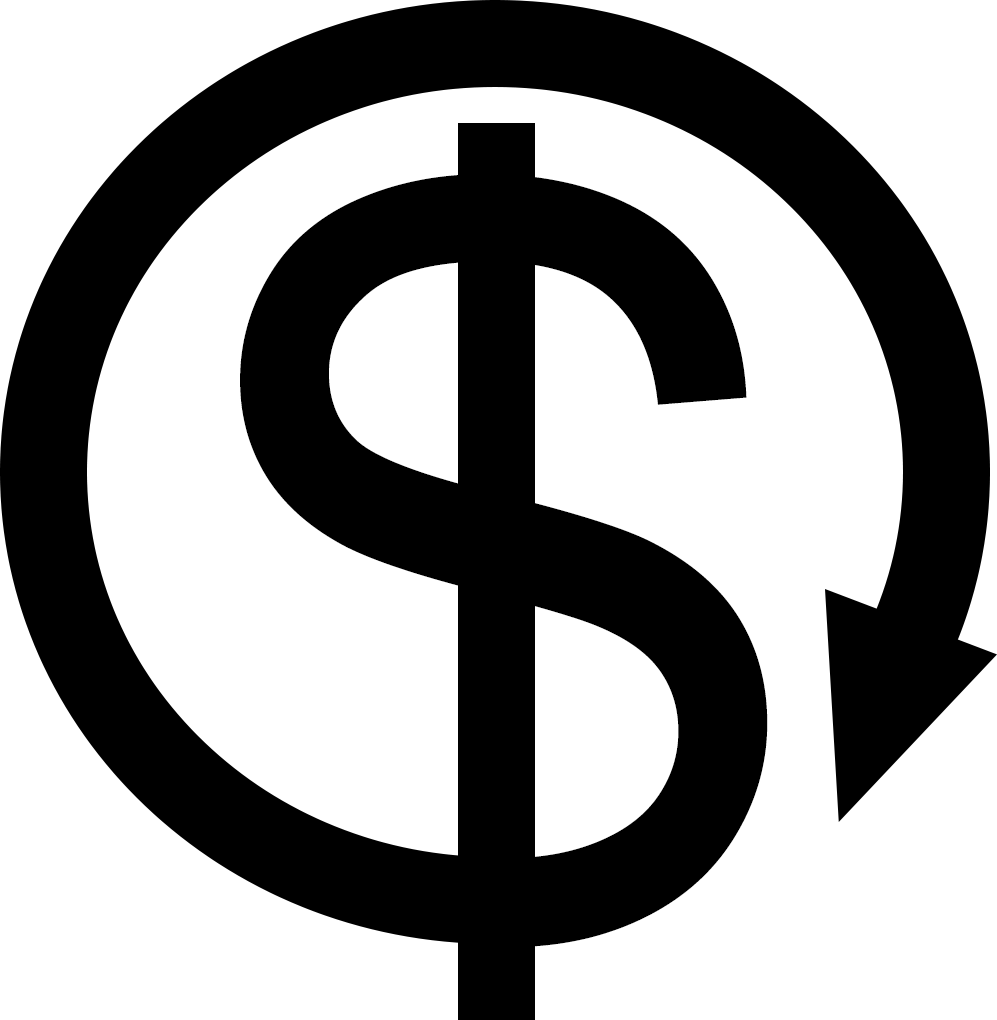
<style>
.page{position:relative;width:997px;height:1020px;background:#ffffff}
.page>*{position:absolute;margin:0}
.t1{font:1043.9px "ArialMT";letter-spacing:-0.2em;color:#000000;scale:0.93 1}
</style>
<div class="page">
<p class="t1" style="left:213px;top:174px;width:555px;height:774px">S</p>
</div>
